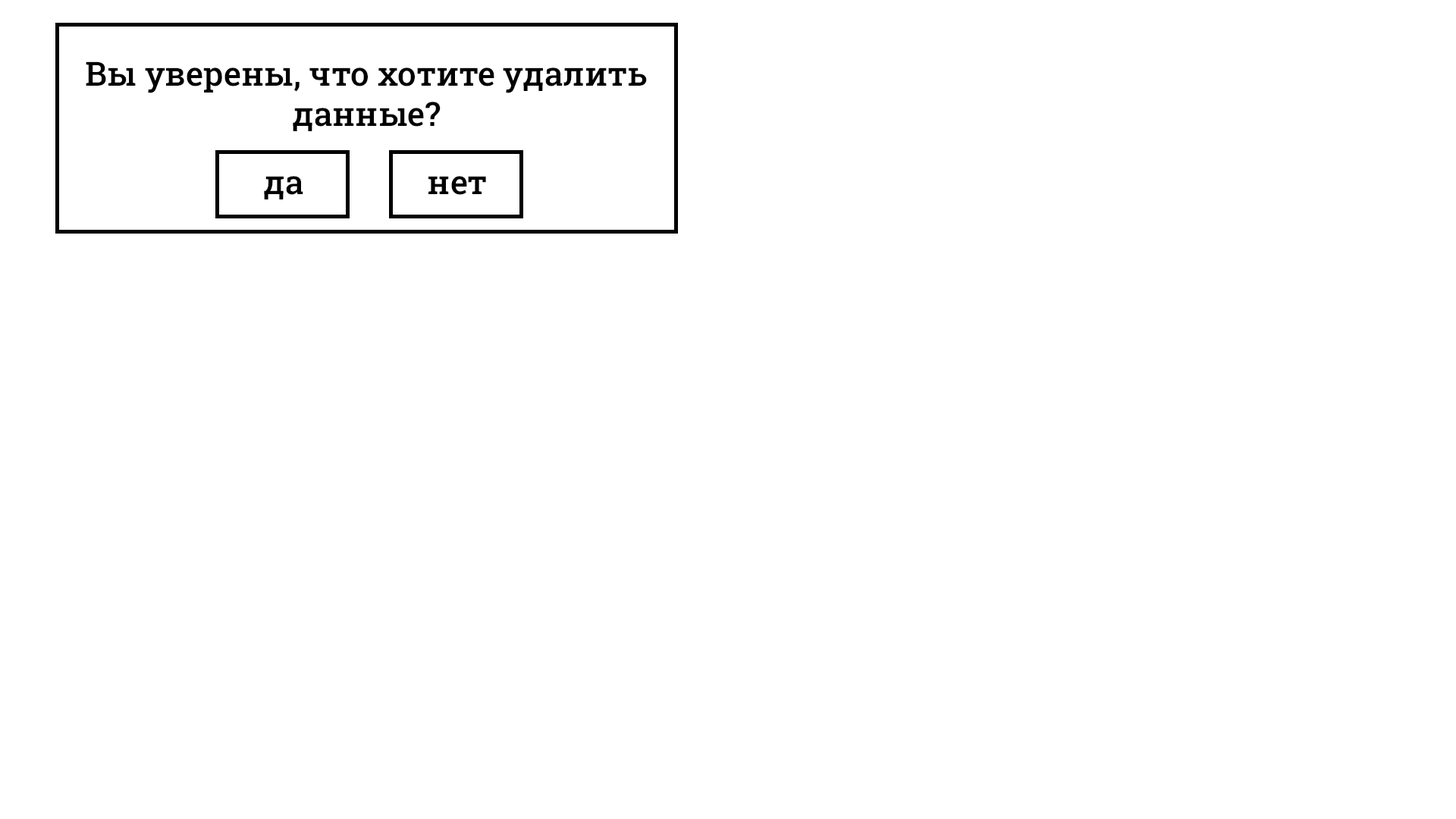
<style>
.page{position:relative;width:1456px;height:819px;background:#ffffff}
.page>*{position:absolute;margin:0}
.t1{font:33.4px "RobotoSlab-Medium";color:#000000}
</style>
<div class="page">
<p class="t1" style="left:86px;top:61px;width:561px;height:70px;text-align:center">Вы уверены, что хотите удалить<br>данные?</p>
<p class="t1" style="left:264px;top:176px;width:39px;height:23px">да</p>
<p class="t1" style="left:428px;top:176px;width:58px;height:19px">нет</p>
</div>
